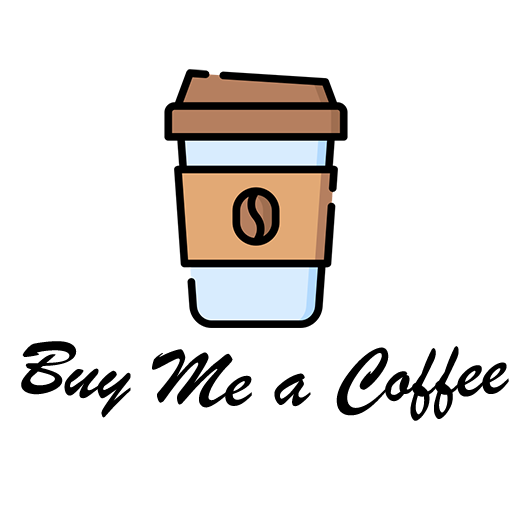
<style>
.page{position:relative;width:512px;height:512px;background:#ffffff}
.page>*{position:absolute;margin:0}
.t1{font:83.3px "BrushScriptMT";color:#000000}
</style>
<div class="page">
<p class="t1" style="left:21px;top:341px;width:488px;height:80px">Buy Me a Coffee</p>
</div>
